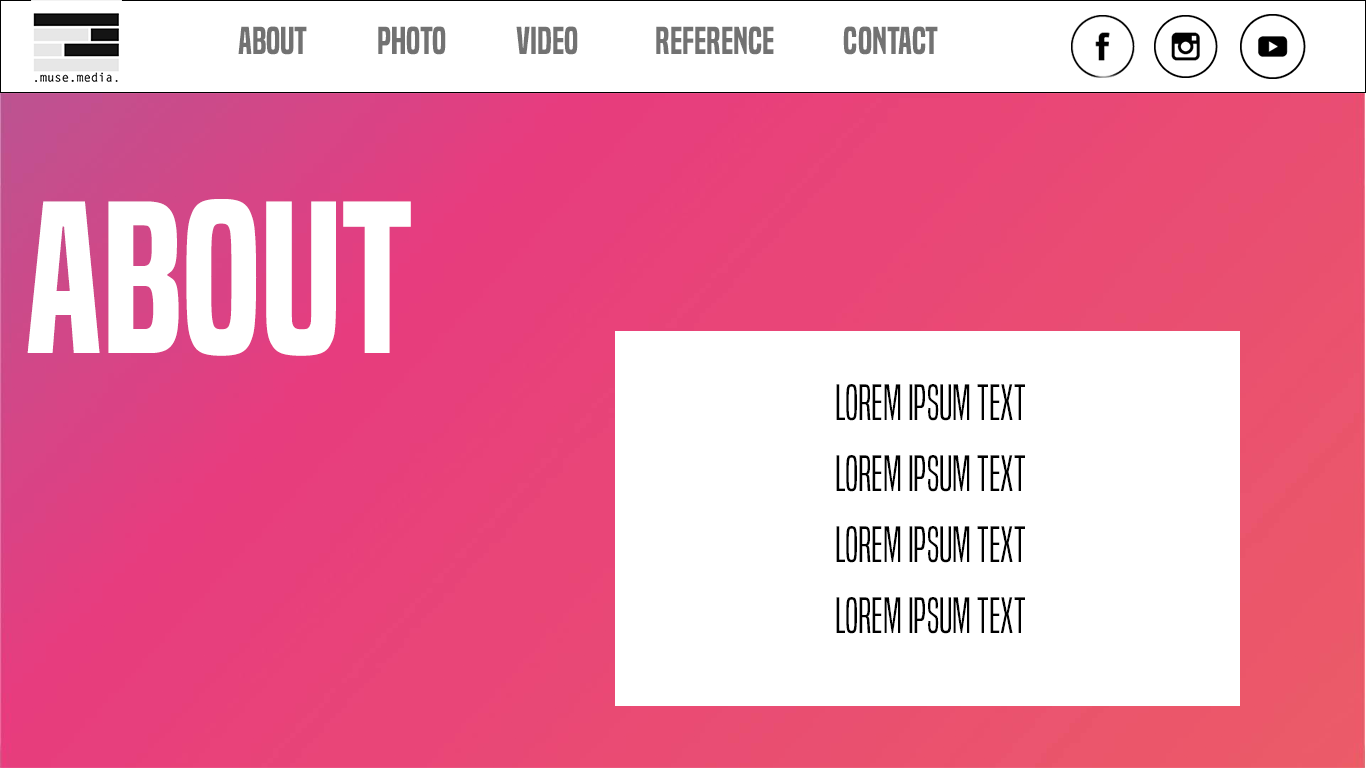
<style>
.page{position:relative;width:1366px;height:768px;background:#ffffff}
.page>*{position:absolute;margin:0}
.t1{font:36px "BuiltTitlingSb-Regular";color:#727272}
.t2{font:200px "BuiltTitlingSb-Regular";color:#ffffff}
.t3{font:47.2px/23.6px "BuiltTitlingLt-Regular";color:#000000}
</style>
<div class="page">
<p class="t1" style="left:238px;top:26px;width:69px;height:29px">About</p>
<p class="t1" style="left:378px;top:26px;width:68px;height:29px">Photo</p>
<p class="t1" style="left:516px;top:26px;width:62px;height:29px">Video</p>
<p class="t1" style="left:656px;top:26px;width:118px;height:29px">Reference</p>
<p class="t1" style="left:843px;top:26px;width:95px;height:29px">Contact</p>
<p class="t2" style="left:27px;top:199px;width:384px;height:157px">ABOUT</p>
<p class="t3" style="left:836px;top:384px;width:189px;height:250px;text-align:center">Lorem Ipsum text <br><br><br>Lorem Ipsum text<br><br><br>Lorem Ipsum text<br><br><br>Lorem Ipsum text</p>
</div>
